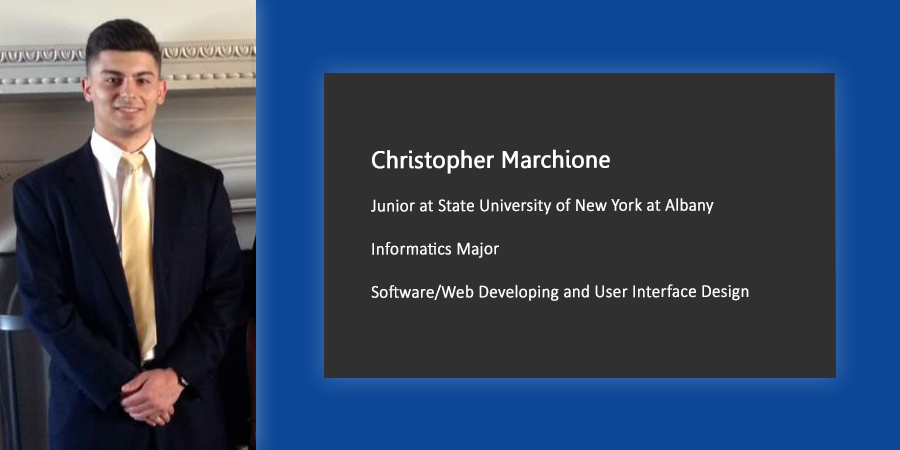
<style>
.page{position:relative;width:900px;height:450px;background:#303031}
.page>*{position:absolute;margin:0}
.t1{font:18px "Calibri-Light";color:#ffffff;font-weight:bold;scale:0.94 1}
.t2{font:24px "Leelawadee";color:#ffffff;font-weight:bold;scale:0.94 1}
</style>
<div class="page">
<p class="t1" style="left:371px;top:149px;width:378px;height:152px"><span class="t2">Christopher Marchione<br></span><br>Junior at State University of New York at Albany<br><br>Informatics Major <br><br>Software/Web Developing and User Interface Design</p>
</div>
